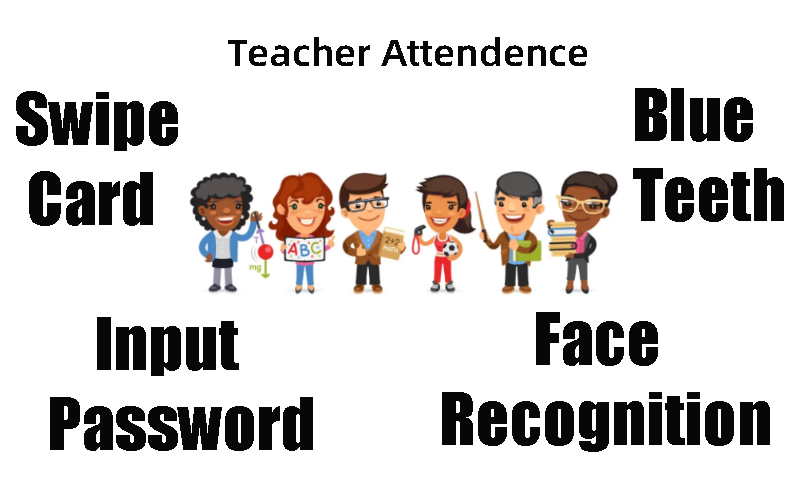
<style>
.page{position:relative;width:800px;height:480px;background:#ffffff}
.page>*{position:absolute;margin:0}
.t1{font:37.5px "AlibabaPuHuiTiM";color:#080707}
.t2{font:66.7px "Impact";color:#080707}
</style>
<div class="page">
<p class="t1" style="left:228px;top:37px;width:359px;height:29px">Teacher Attendence</p>
<p class="t2" style="left:633px;top:88px;width:151px;height:134px">Blue <br>  Teeth</p>
<p class="t2" style="left:16px;top:91px;width:162px;height:135px">Swipe <br>  Card</p>
<p class="t2" style="left:50px;top:317px;width:263px;height:134px">Input <br> Password</p>
<p class="t2" style="left:442px;top:312px;width:328px;height:140px">Face <br>Recognition</p>
</div>
